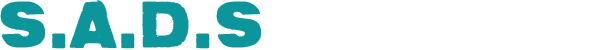
<style>
.page{position:relative;width:600px;height:50px;background:#ffffff}
.page>*{position:absolute;margin:0}
.t1{font:64.6px "Charliedon'tsurf!";color:#0c969c}
.t2{font:64.6px "Charliedon'tsurf!";color:#ffffff}
</style>
<div class="page">
<p class="t1" style="left:0px;top:0px;width:600px;height:49px">s.a.d.s<span class="t2">ASMITHA</span></p>
</div>
